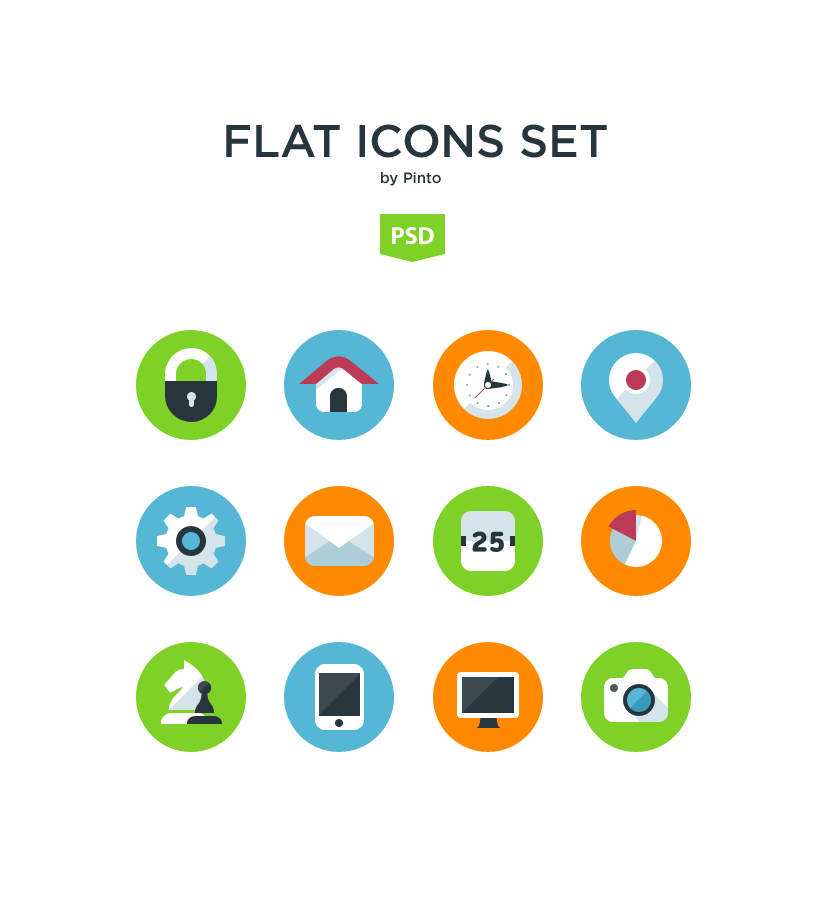
<style>
.page{position:relative;width:827px;height:897px;background:#ffffff}
.page>*{position:absolute;margin:0}
.t1{font:45.9px "GothamPro-Medium";letter-spacing:-0.005em;color:#27353c;text-transform:uppercase}
.t2{font:15px "GothamPro-Medium";letter-spacing:-0.005em;color:#27353c}
.t3{font:24.8px "MyriadPro-Bold";color:#ffffff}
</style>
<div class="page">
<p class="t1" style="left:226px;top:124px;width:381px;height:34px">Flat icons set</p>
<p class="t2" style="left:381px;top:172px;width:60px;height:14px">by Pinto</p>
<p class="t3" style="left:392px;top:227px;width:42px;height:18px">PSD</p>
</div>
